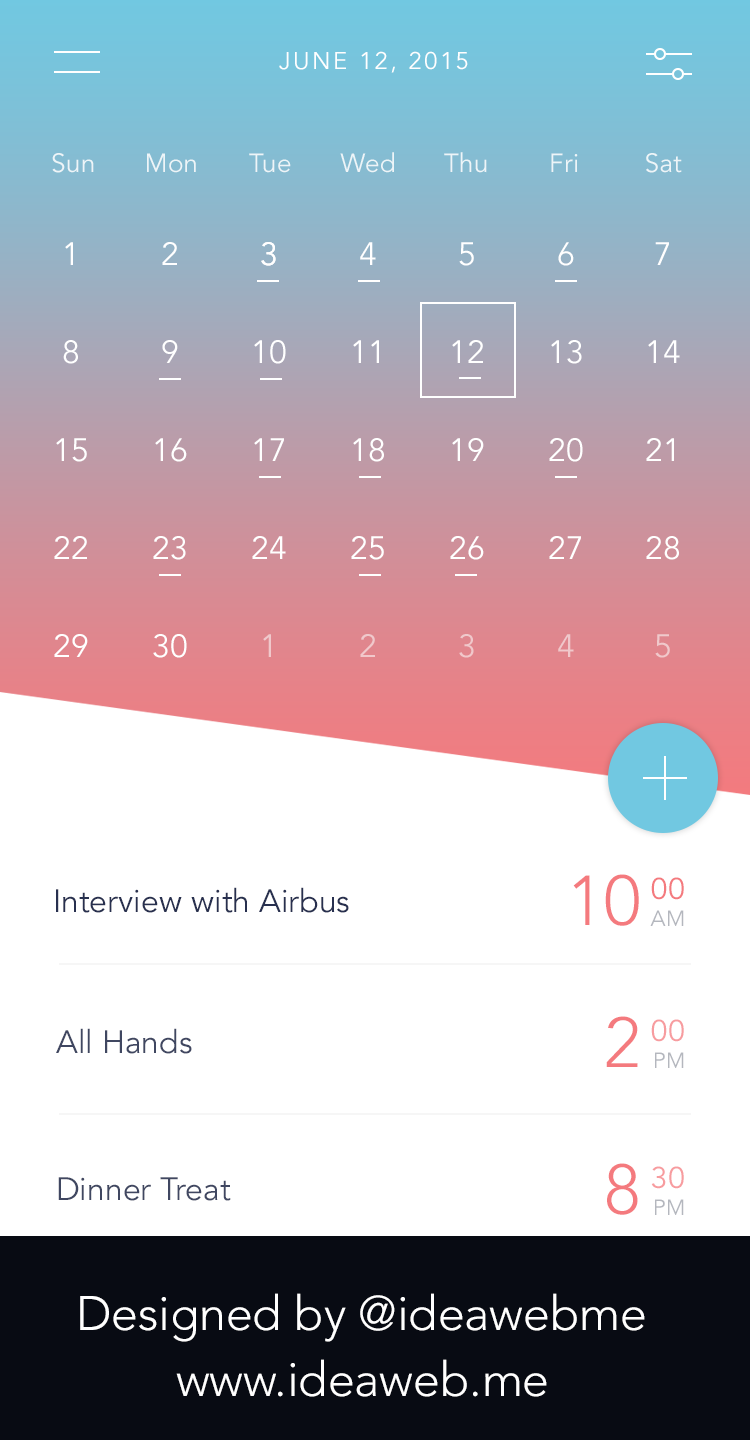
<style>
.page{position:relative;width:750px;height:1440px;background:#ffffff}
.page>*{position:absolute;margin:0}
.t1{font:24px "Avenir-Book";letter-spacing:0.1em;color:#ffffff}
.t2{font:26px "Avenir-Book";letter-spacing:0.015em;color:#ffffff}
.t3{font:32px "Avenir-Book";letter-spacing:0.015em;color:#ffffff}
.t4{font:32px "Avenir-Book";letter-spacing:0.015em;color:#f0c8cb}
.t5{font:70px "Avenir-Light";letter-spacing:0.015em;color:#f47a7e}
.t6{font:30px "Avenir-Book";letter-spacing:0.015em;color:#f47a7e}
.t7{font:32px "Avenir-Book";color:#28304f}
.t8{font:22px "Avenir-Book";letter-spacing:0.015em;color:#b4b7be}
.t9{font:30px "Avenir-Book";letter-spacing:0.015em;color:#f79c9f}
.t10{font:32px "Avenir-Book";color:#404761}
.t11{font:48px "Avenir-Light";color:#ffffff}
</style>
<div class="page">
<p class="t1" style="left:279px;top:51px;width:189px;height:22px">JUNE 12, 2015</p>
<p class="t2" style="left:52px;top:153px;width:42px;height:20px;opacity:0.83">Sun</p>
<p class="t2" style="left:147px;top:153px;width:49px;height:20px;opacity:0.83">Mon</p>
<p class="t2" style="left:249px;top:153px;width:42px;height:20px;opacity:0.83">Tue</p>
<p class="t2" style="left:340px;top:152px;width:54px;height:21px;opacity:0.83">Wed</p>
<p class="t2" style="left:444px;top:152px;width:43px;height:21px;opacity:0.83">Thu</p>
<p class="t2" style="left:551px;top:153px;width:27px;height:19px;opacity:0.83">Fri</p>
<p class="t2" style="left:646px;top:153px;width:36px;height:20px;opacity:0.83">Sat</p>
<p class="t3" style="left:65px;top:242px;width:8px;height:23px">1</p>
<p class="t3" style="left:162px;top:242px;width:15px;height:23px">2</p>
<p class="t3" style="left:261px;top:242px;width:15px;height:24px">3</p>
<p class="t3" style="left:261px;top:242px;width:15px;height:24px">3</p>
<p class="t3" style="left:360px;top:242px;width:16px;height:23px">4</p>
<p class="t3" style="left:459px;top:242px;width:15px;height:24px">5</p>
<p class="t3" style="left:558px;top:242px;width:16px;height:24px">6</p>
<p class="t3" style="left:655px;top:242px;width:14px;height:23px">7</p>
<p class="t3" style="left:63px;top:340px;width:15px;height:24px">8</p>
<p class="t3" style="left:162px;top:340px;width:16px;height:23px">9</p>
<p class="t3" style="left:254px;top:340px;width:32px;height:24px">10</p>
<p class="t3" style="left:353px;top:340px;width:26px;height:23px">11</p>
<p class="t3" style="left:452px;top:340px;width:31px;height:23px">12</p>
<p class="t3" style="left:551px;top:340px;width:31px;height:24px">13</p>
<p class="t3" style="left:648px;top:340px;width:32px;height:23px">14</p>
<p class="t3" style="left:56px;top:438px;width:31px;height:24px">15</p>
<p class="t3" style="left:155px;top:438px;width:32px;height:24px">16</p>
<p class="t3" style="left:254px;top:438px;width:30px;height:23px">17</p>
<p class="t3" style="left:353px;top:438px;width:31px;height:24px">18</p>
<p class="t3" style="left:452px;top:438px;width:32px;height:23px">19</p>
<p class="t3" style="left:549px;top:438px;width:34px;height:24px">20</p>
<p class="t3" style="left:646px;top:438px;width:28px;height:23px">21</p>
<p class="t3" style="left:54px;top:536px;width:33px;height:23px">22</p>
<p class="t3" style="left:153px;top:536px;width:33px;height:24px">23</p>
<p class="t3" style="left:252px;top:536px;width:34px;height:23px">24</p>
<p class="t3" style="left:351px;top:536px;width:33px;height:24px">25</p>
<p class="t3" style="left:450px;top:536px;width:34px;height:24px">26</p>
<p class="t3" style="left:549px;top:536px;width:32px;height:23px">27</p>
<p class="t3" style="left:646px;top:536px;width:33px;height:24px">28</p>
<p class="t3" style="left:54px;top:634px;width:34px;height:23px">29</p>
<p class="t3" style="left:153px;top:634px;width:34px;height:24px">30</p>
<p class="t4" style="left:263px;top:634px;width:8px;height:23px">1</p>
<p class="t4" style="left:360px;top:634px;width:15px;height:23px">2</p>
<p class="t4" style="left:459px;top:634px;width:15px;height:24px">3</p>
<p class="t4" style="left:558px;top:634px;width:16px;height:23px">4</p>
<p class="t4" style="left:655px;top:634px;width:15px;height:24px">5</p>
<p class="t5" style="left:573px;top:874px;width:66px;height:52px">10</p>
<p class="t6" style="left:651px;top:877px;width:33px;height:23px">00</p>
<p class="t7" style="left:56px;top:887px;width:293px;height:26px">Interview with Airbus</p>
<p class="t8" style="left:650px;top:910px;width:34px;height:16px">AM</p>
<p class="t5" style="left:606px;top:1016px;width:32px;height:51px">2</p>
<p class="t9" style="left:651px;top:1019px;width:33px;height:23px">00</p>
<p class="t10" style="left:56px;top:1028px;width:136px;height:26px">All Hands</p>
<p class="t8" style="left:655px;top:1052px;width:29px;height:16px">PM</p>
<p class="t5" style="left:607px;top:1163px;width:31px;height:52px">8</p>
<p class="t9" style="left:651px;top:1166px;width:33px;height:23px">30</p>
<p class="t10" style="left:58px;top:1177px;width:173px;height:24px">Dinner Treat</p>
<p class="t8" style="left:655px;top:1199px;width:29px;height:16px">PM</p>
<p class="t11" style="left:80px;top:1293px;width:565px;height:49px">Designed by @ideawebme</p>
<p class="t11" style="left:176px;top:1359px;width:371px;height:38px">www.ideaweb.me</p>
</div>
